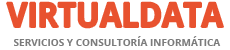
<style>
.page{position:relative;width:230px;height:50px;background:#ffffff}
.page>*{position:absolute;margin:0}
.t1{font:33.9px "OpenSans-Bold";color:#e8522f;scale:0.92 1}
.t2{font:10px "OpenSans-Bold";color:#7b7b7b}
</style>
<div class="page">
<p class="t1" style="left:7px;top:2px;width:216px;height:26px">VIRTUALDATA</p>
<p class="t2" style="left:14px;top:36px;width:207px;height:10px">SERVICIOS Y CONSULTORÍA INFORMÁTICA</p>
</div>
